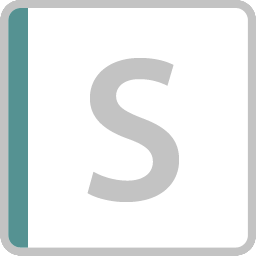
<style>
.page{position:relative;width:256px;height:256px;background:#ffffff}
.page>*{position:absolute;margin:0}
.t1{font:208.3px "MyriadPro-Semibold";color:#b0b0b0}
</style>
<div class="page">
<p class="t1" style="left:87px;top:58px;width:92px;height:144px;opacity:0.76">S</p>
</div>
